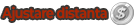
<style>
.page{position:relative;width:135px;height:26px;background:#ffffff}
.page>*{position:absolute;margin:0}
.t1{font:14.3px "Montserrat-Bold";letter-spacing:-0.04em;color:#af2601;scale:0.88 1}
</style>
<div class="page">
<p class="t1" style="left:2px;top:6px;width:105px;height:15px">Ajustare distanta</p>
</div>
